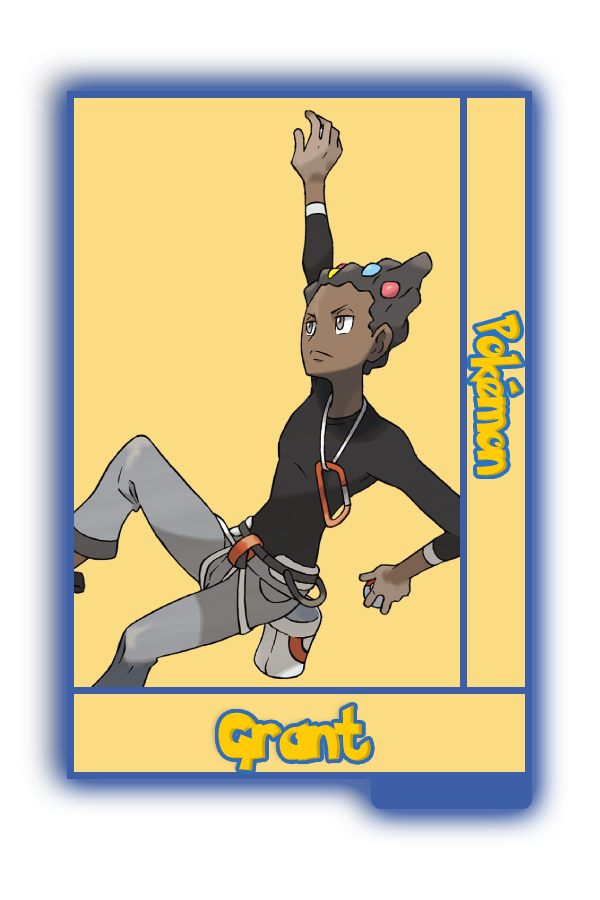
<style>
.page{position:relative;width:600px;height:900px;background:#fbdc83}
.page>*{position:absolute;margin:0}
.t1{font:48.8px "PokemonSolidNormal";color:#ffcb05;scale:0.8 1}
.t2{font:56.6px "PokemonSolidNormal";color:#ffcb05;scale:0.92 1}
</style>
<div class="page">
<p class="t1" style="left:469px;top:313px;width:54px;height:163px;rotate:90deg">Pokémon</p>
<p class="t2" style="left:218px;top:705px;width:153px;height:66px">Grant</p>
</div>
